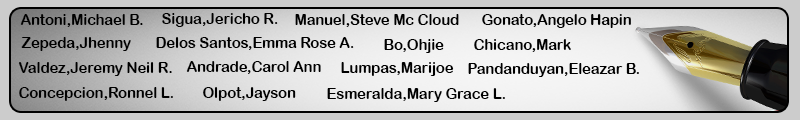
<style>
.page{position:relative;width:800px;height:120px}
.page>*{position:absolute;margin:0}
.t1{font:14.6px "ArialRoundedMTBold";color:#000000}
</style>
<div class="page">
<p class="t1" style="left:20px;top:14px;width:123px;height:13px">Antoni,Michael B.</p>
<p class="t1" style="left:162px;top:13px;width:116px;height:14px">Sigua,Jericho R.</p>
<p class="t1" style="left:295px;top:14px;width:164px;height:13px">Manuel,Steve Mc Cloud</p>
<p class="t1" style="left:482px;top:14px;width:149px;height:14px">Gonato,Angelo Hapin</p>
<p class="t1" style="left:21px;top:37px;width:110px;height:14px">Zepeda,J henny</p>
<p class="t1" style="left:156px;top:37px;width:198px;height:13px">Delos Santos,Emma Rose A.</p>
<p class="t1" style="left:384px;top:39px;width:60px;height:14px">Bo,Ohjie</p>
<p class="t1" style="left:474px;top:39px;width:97px;height:13px">Chicano,Mark</p>
<p class="t1" style="left:18px;top:62px;width:154px;height:14px">Valdez,Jeremy Neil R.</p>
<p class="t1" style="left:186px;top:61px;width:135px;height:13px">Andrade,Carol Ann</p>
<p class="t1" style="left:341px;top:62px;width:113px;height:14px">Lumpas,Marijoe</p>
<p class="t1" style="left:468px;top:63px;width:171px;height:14px">Pandanduyan,Eleazar B.</p>
<p class="t1" style="left:19px;top:87px;width:154px;height:14px">Concepcion,Ronnel L.</p>
<p class="t1" style="left:203px;top:87px;width:93px;height:14px">Olpot,Jayson</p>
<p class="t1" style="left:327px;top:88px;width:178px;height:14px">Esmeralda,Mary Grace L.</p>
</div>
